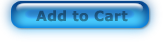
<style>
.page{position:relative;width:164px;height:43px}
.page>*{position:absolute;margin:0}
.t1{font:14px "Verdana-Bold";letter-spacing:0.02em;color:#205b87}
</style>
<div class="page">
<p class="t1" style="left:36px;top:10px;width:92px;height:12px">Add to Cart</p>
</div>
